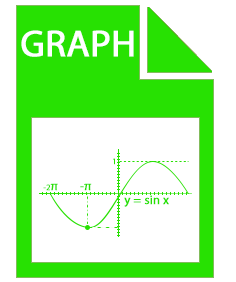
<style>
.page{position:relative;width:236px;height:282px;background:#ffffff}
.page>*{position:absolute;margin:0}
.t1{font:37.5px "MyriadPro-Regular";color:#ffffff;font-weight:bold}
.t2{font:8.3px "MyriadPro-Regular";color:#27e002;font-weight:bold}
.t3{font:12.5px "MyriadPro-Regular";color:#27e002;font-weight:bold}
</style>
<div class="page">
<p class="t1" style="left:21px;top:30px;width:113px;height:27px">GRAPH</p>
<p class="t2" style="left:113px;top:158px;width:2px;height:7px">1</p>
<p class="t2" style="left:43px;top:183px;width:15px;height:8px">-2<span class="t3">π</span></p>
<p class="t3" style="left:80px;top:183px;width:12px;height:8px">-π</p>
<p class="t3" style="left:124px;top:195px;width:45px;height:12px">y = sin x</p>
</div>
